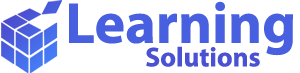
<style>
.page{position:relative;width:300px;height:73px;background:#ffffff}
.page>*{position:absolute;margin:0}
.t1{font:58.2px "MyriadPro-Bold";color:#4860df}
.t2{font:27.3px "MyriadPro-Bold";color:#4a51d2}
</style>
<div class="page">
<p class="t1" style="left:69px;top:1px;width:224px;height:55px">Learning</p>
<p class="t2" style="left:146px;top:46px;width:114px;height:21px">Solutions</p>
</div>
